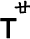
<style>
.page{position:relative;width:30px;height:39px;background:#ffffff}
.page>*{position:absolute;margin:0}
.t1{font:18px "DFKaiShu-SB-Estd-BF";color:#000000;font-weight:bold}
.t2{font:27px "ArialMT";color:#000000;font-weight:bold}
</style>
<div class="page">
<p class="t1" style="left:14px;top:0px;width:17px;height:14px">廿</p>
<p class="t2" style="left:0px;top:18px;width:17px;height:21px">T</p>
</div>
